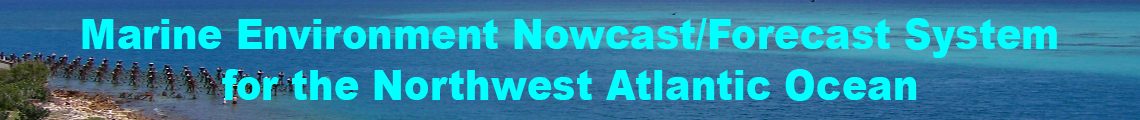
<style>
.page{position:relative;width:1140px;height:120px}
.page>*{position:absolute;margin:0}
.t1{font:42px "Arial-Black";color:#00ffff;scale:0.91 1}
</style>
<div class="page">
<p class="t1" style="left:82px;top:18px;width:975px;height:83px;text-align:center">Marine Environment Nowcast/Forecast System<br>for the Northwest Atlantic Ocean</p>
</div>
